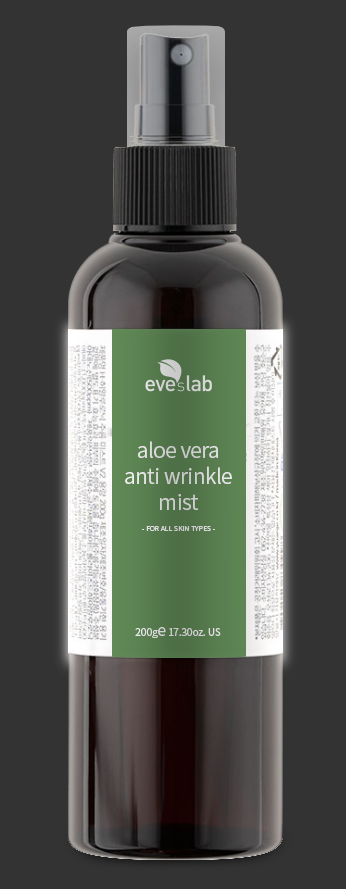
<style>
.page{position:relative;width:346px;height:889px;background:#333333}
.page>*{position:absolute;margin:0}
.t1{font:20.7px/25.9px "NotoSansKR-Regular";letter-spacing:-0.025em;color:#d4d4d4}
.t2{font:6.7px "NotoSansKR-Regular";color:#d2d2d2}
.t3{font:10.4px "NotoSansKR-Regular";letter-spacing:-0.025em;color:#d5d5d5}
.t4{font:15.5px "NotoSansKR-Regular";letter-spacing:-0.025em;color:#d5d5d5}
</style>
<div class="page">
<p class="t1" style="left:125px;top:441px;width:107px;height:69px;text-align:center">aloe vera<br>anti wrinkle<br>mist</p>
<p class="t2" style="left:142px;top:526px;width:73px;height:5px">- FOR ALL SKIN TYPES -</p>
<p class="t3" style="left:135px;top:627px;width:86px;height:11px">200g<span class="t4">e</span> 17.30oz. US</p>
</div>
